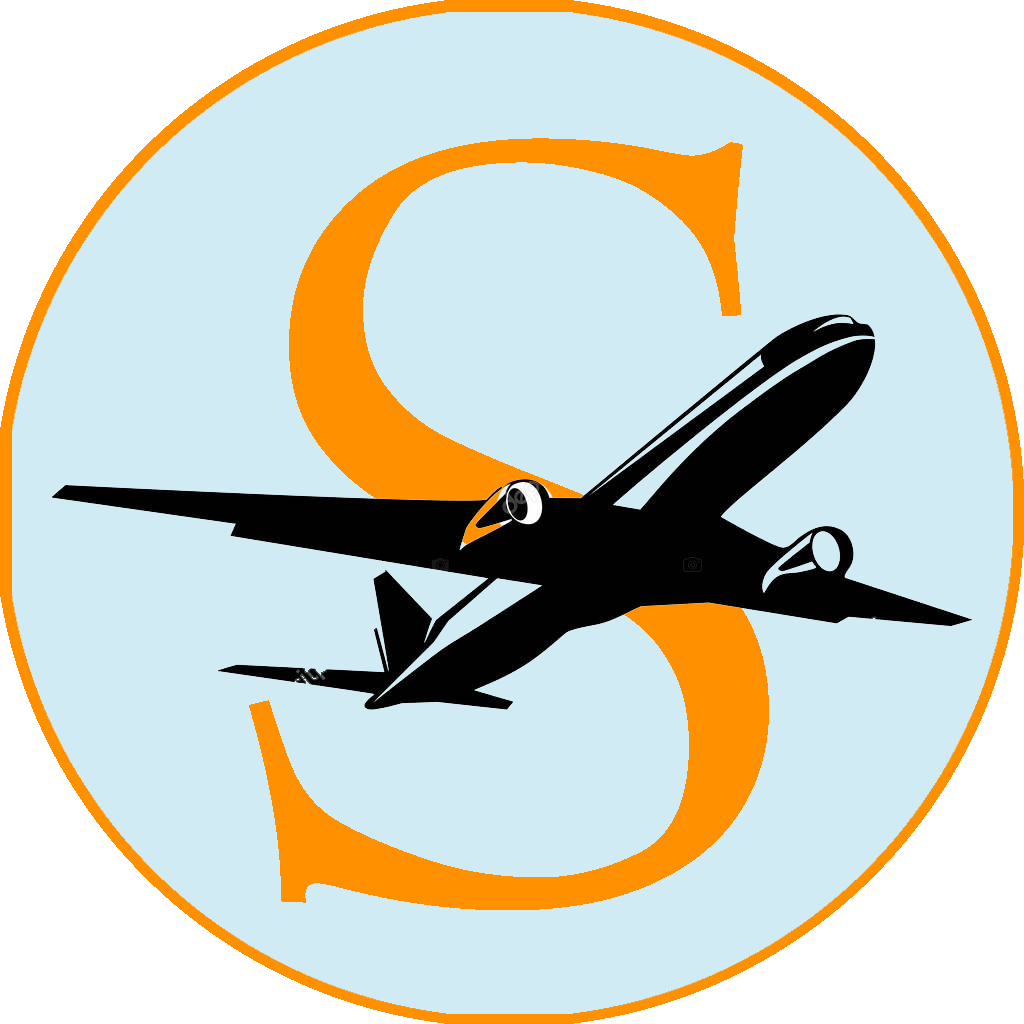
<style>
.page{position:relative;width:1024px;height:1024px;background:#d0ebf3}
.page>*{position:absolute;margin:0}
.t1{font:1200px "Centaur";color:#ff9000}
</style>
<div class="page">
<p class="t1" style="left:249px;top:138px;width:520px;height:772px">S</p>
</div>
